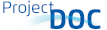
<style>
.page{position:relative;width:107px;height:30px;background:#ffffff}
.page>*{position:absolute;margin:0}
.t1{font:16.3px "Flexo-Regular";color:#005aa9}
.t2{font:28.1px "Flexo-Bold";color:#005aa9}
</style>
<div class="page">
<p class="t1" style="left:3px;top:0px;width:51px;height:17px">Project</p>
<p class="t2" style="left:50px;top:9px;width:51px;height:20px">DOC</p>
</div>
